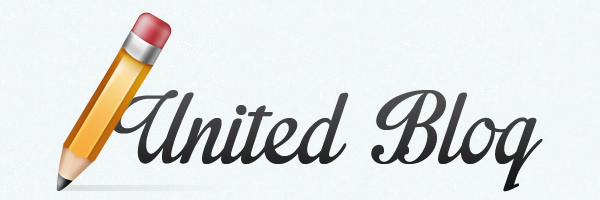
<style>
.page{position:relative;width:600px;height:200px}
.page>*{position:absolute;margin:0}
.t1{font:139.6px "ImpregnablePersonalUseOnly";color:#333333}
</style>
<div class="page">
<p class="t1" style="left:111px;top:90px;width:432px;height:102px">United Blog</p>
</div>
